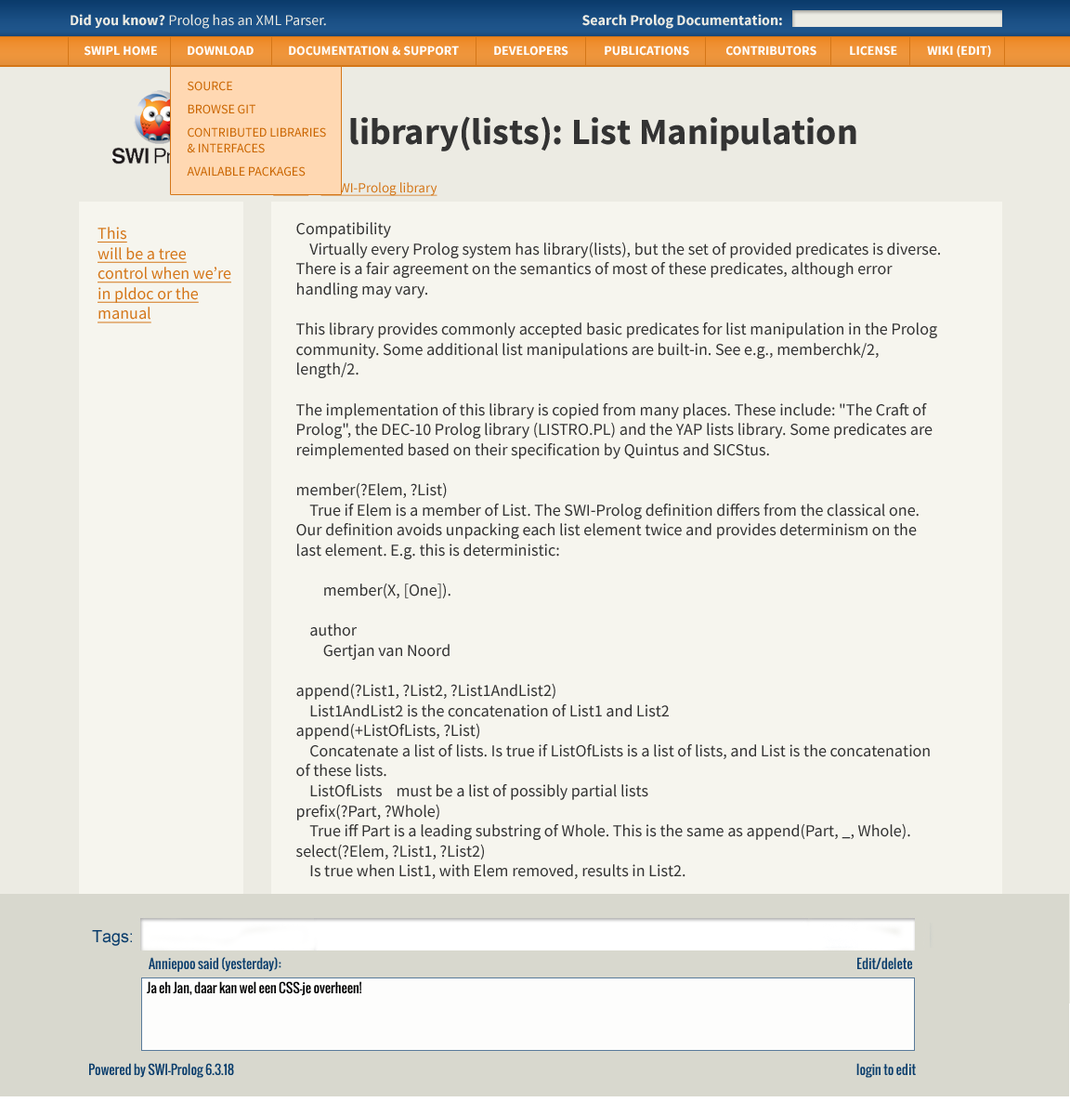
<style>
.page{position:relative;width:1070px;height:1115px;background:#f6f5ee}
.page>*{position:absolute;margin:0}
.t1{font:14.9px "SourceSansPro-Regular";color:#ecebe3}
.t2{font:14.9px "SourceSansPro-Bold";color:#ecebe3}
.t3{font:13px "SourceSansPro-Bold";color:#ffffff;text-transform:uppercase}
.t4{font:13px "SourceSansPro-Regular";color:#ca6500;text-transform:uppercase}
.t5{font:37.2px "SourceSansPro-Bold";color:#333333}
.t6{font:13.9px "SourceSansPro-Regular";color:#d47618;text-decoration:underline}
.t7{font:13.9px "SourceSansPro-Regular";color:#333333}
.t8{font:16.7px "SourceSansPro-Regular";color:#333333}
.t9{font:16.7px "SourceSansPro-Regular";color:#d47618;text-decoration:underline}
.t10{font:16.7px "ArialMT";color:#0a3d6c}
.t11{font:13px "Oswald";color:#0a3d6c}
.t12{font:13px "Oswald";color:#000000}
</style>
<div class="page">
<p class="t1" style="left:71px;top:14px;width:255px;height:15px"><span class="t2">Did you know? </span>Prolog has an XML Parser.</p>
<p class="t2" style="left:582px;top:14px;width:200px;height:15px">Search Prolog Documentation:</p>
<p class="t3" style="left:84px;top:46px;width:73px;height:10px">SWIPL HOME</p>
<p class="t3" style="left:188px;top:46px;width:66px;height:10px">Download</p>
<p class="t3" style="left:289px;top:46px;width:170px;height:10px">Documentation &amp; Support</p>
<p class="t3" style="left:494px;top:46px;width:74px;height:10px">Developers</p>
<p class="t3" style="left:605px;top:46px;width:84px;height:10px">Publications</p>
<p class="t3" style="left:726px;top:46px;width:90px;height:10px">Contributors</p>
<p class="t3" style="left:850px;top:46px;width:47px;height:10px">License</p>
<p class="t3" style="left:927px;top:45px;width:64px;height:13px">Wiki (edit)</p>
<p class="t4" style="left:187px;top:81px;width:139px;height:95px">source<br>browse git<br>contributed libraries<br>&amp; Interfaces<br>available packages</p>
<p class="t5" style="left:268px;top:116px;width:588px;height:35px">A.12 library(lists): List Manipulation</p>
<p class="t6" style="left:273px;top:182px;width:164px;height:14px">Home <span class="t7">&gt; </span>A SWI-Prolog library</p>
<p class="t8" style="left:296px;top:222px;width:644px;height:657px">Compatibility<br>    Virtually every Prolog system has library(lists), but the set of provided predicates is diverse. There is a fair agreement on the semantics of most of these predicates, although error handling may vary.<br><br>This library provides commonly accepted basic predicates for list manipulation in the Prolog community. Some additional list manipulations are built-in. See e.g., memberchk/2, length/2.<br><br>The implementation of this library is copied from many places. These include: "The Craft of Prolog", the DEC-10 Prolog library (LISTRO.PL) and the YAP lists library. Some predicates are reimplemented based on their specification by Quintus and SICStus.<br><br>member(?Elem, ?List)<br>    True if Elem is a member of List. The SWI-Prolog definition differs from the classical one. Our definition avoids unpacking each list element twice and provides determinism on the last element. E.g. this is deterministic:<br><br>        member(X, [One]).<br><br>    author<br>        Gertjan van Noord<br><br>append(?List1, ?List2, ?List1AndList2)<br>    List1AndList2 is the concatenation of List1 and List2<br>append(+ListOfLists, ?List)<br>    Concatenate a list of lists. Is true if ListOfLists is a list of lists, and List is the concatenation of these lists.<br>    ListOfLists  must be a list of possibly partial lists<br>prefix(?Part, ?Whole)<br>    True iff Part is a leading substring of Whole. This is the same as append(Part, _, Whole).<br>select(?Elem, ?List1, ?List2)<br>    Is true when List1, with Elem removed, results in List2.<br>[semidet]selectchk(+Elem, +List, -Rest)<br>    Semi-deterministic removal of first element in List that unifies with Elem.<br>[nondet]select(?X, ?XList, ?Y, ?YList)<br>    Select two elements from two lists at the same place. True when select(X, XList) and select(Y, YList) are true, X and Y appear in the same locations of their respective lists and same_length(XList, YList) is true. A typical use for this predicate is to replace an element:<br><br>    ?- select(b, [a,b,c], 2, X).<br>    X = [a, 2, c] ;<br>    X = [a, b, c].<br><br>[semidet]selectchk(?X, ?XList, ?Y, ?YList)<br>    Semi-deterministic version of select/4.<br>nextto(?X, ?Y, ?List)<br>    True if Y follows X in List.</p>
<p class="t9" style="left:98px;top:227px;width:133px;height:96px">This<br>will be a tree<br>control when we’re in pldoc or the manual</p>
<p class="t10" style="left:92px;top:930px;width:40px;height:15px">Tags:</p>
<p class="t11" style="left:149px;top:957px;width:132px;height:14px">Anniepoo said (yesterday):</p>
<p class="t11" style="left:857px;top:957px;width:56px;height:12px">Edit/delete</p>
<p class="t12" style="left:147px;top:981px;width:214px;height:15px">Ja eh Jan, daar kan wel een CSS-je overheen!</p>
<p class="t11" style="left:89px;top:1062px;width:145px;height:15px">Powered by SWI-Prolog 6.3.18</p>
<p class="t11" style="left:856px;top:1062px;width:60px;height:15px">login to edit</p>
</div>
